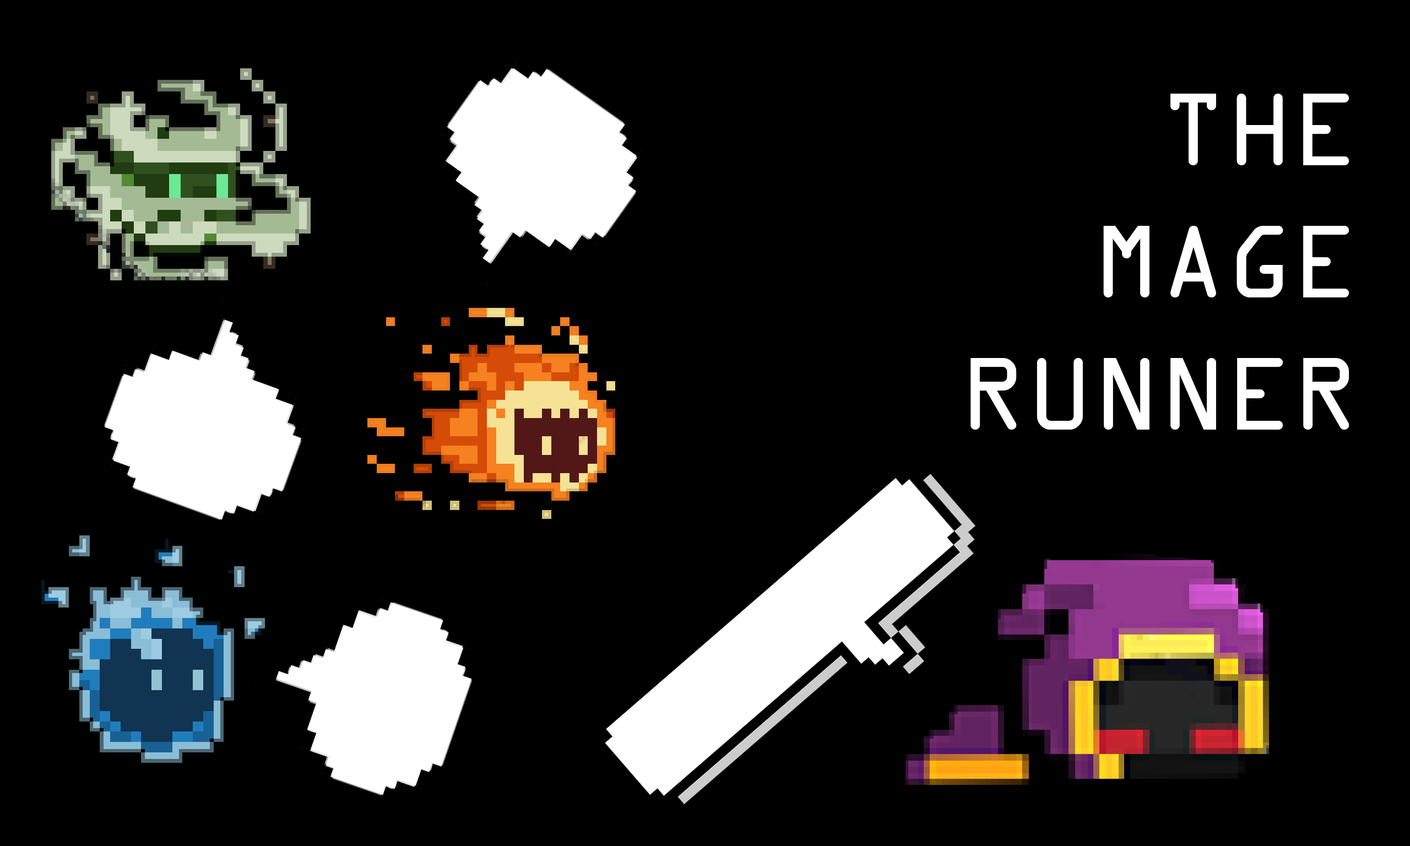
<style>
.page{position:relative;width:1410px;height:846px;background:#000000}
.page>*{position:absolute;margin:0}
.t1{font:110.1px "OCRAExtended";color:#ffffff}
</style>
<div class="page">
<p class="t1" style="left:970px;top:94px;width:379px;height:336px;text-align:right">THE <br>MAGE <br>RUNNER</p>
</div>
